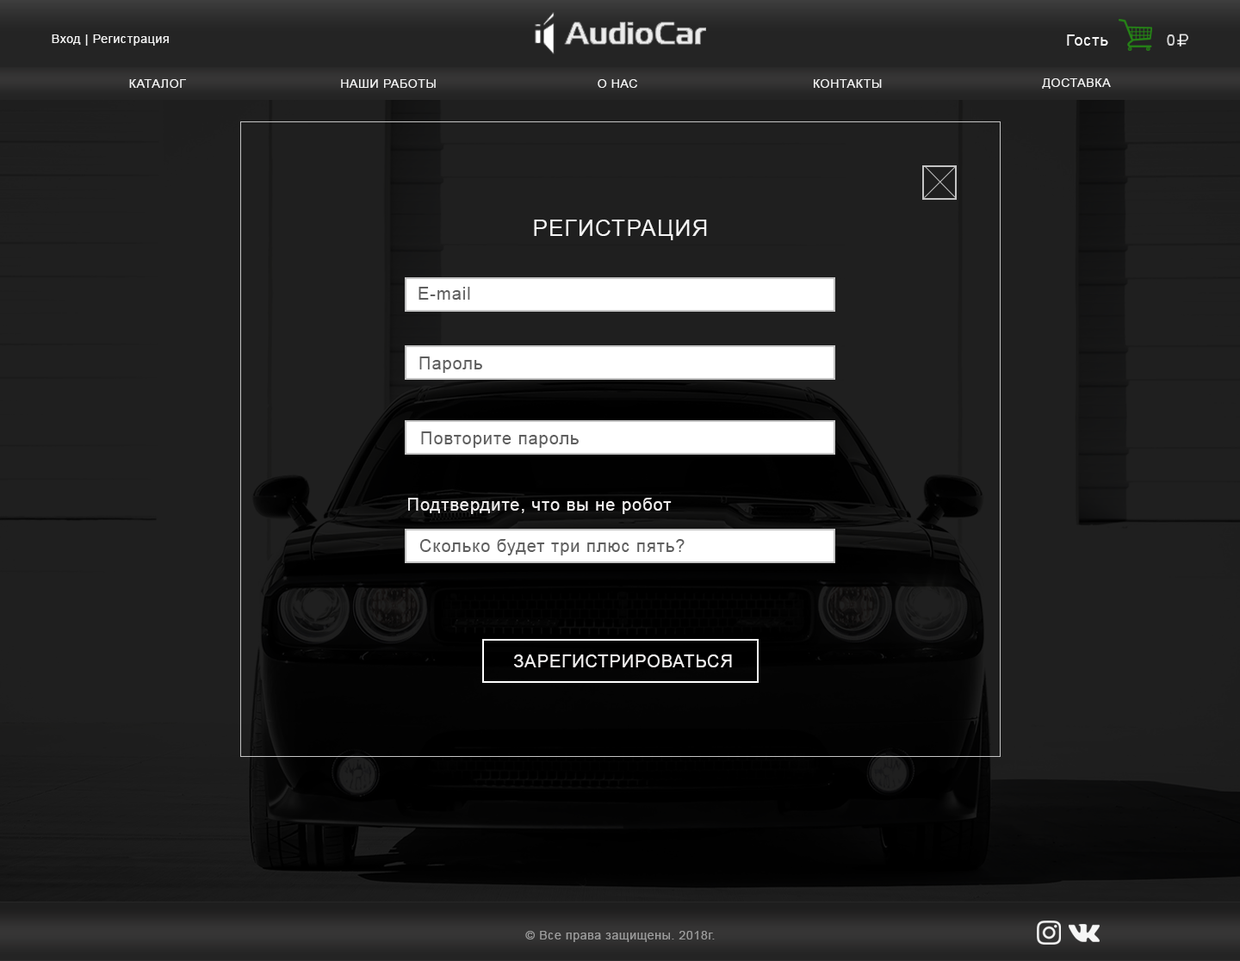
<style>
.page{position:relative;width:1240px;height:961px;background:#1f1f1f}
.page>*{position:absolute;margin:0}
.t1{font:12.1px "ArialMT";letter-spacing:0.05em;color:#f4f4f4}
.t2{font:15.5px "ArialMT";letter-spacing:0.05em;color:#f4f4f4}
.t3{font:15.5px "ArialMT";letter-spacing:0.05em;color:#d4d4d4}
.t4{font:22.4px "ArialMT";letter-spacing:0.05em;color:#f4f4f4}
.t5{font:17.2px "ArialMT";letter-spacing:0.05em;color:#5f5f5f}
.t6{font:17.2px "ArialMT";letter-spacing:0.05em;color:#f1efef}
.t7{font:12.1px "ArialMT";letter-spacing:0.05em;color:#9d9d9d}
</style>
<div class="page">
<p class="t1" style="left:52px;top:34px;width:117px;height:12px">Вход | Регистрация</p>
<p class="t2" style="left:1067px;top:34px;width:42px;height:12px">Гость</p>
<p class="t3" style="left:1167px;top:34px;width:8px;height:12px">0</p>
<p class="t1" style="left:129px;top:79px;width:57px;height:9px">КАТАЛОГ</p>
<p class="t1" style="left:341px;top:79px;width:95px;height:9px">НАШИ РАБОТЫ</p>
<p class="t1" style="left:598px;top:79px;width:39px;height:9px">О НАС</p>
<p class="t1" style="left:814px;top:79px;width:68px;height:9px">КОНТАКТЫ</p>
<p class="t1" style="left:1042px;top:78px;width:69px;height:11px">ДОСТАВКА</p>
<p class="t4" style="left:534px;top:220px;width:173px;height:20px">РЕГИСТРАЦИЯ</p>
<p class="t5" style="left:419px;top:287px;width:51px;height:13px">E-mail</p>
<p class="t5" style="left:420px;top:357px;width:62px;height:16px">Пароль</p>
<p class="t5" style="left:421px;top:432px;width:158px;height:16px">Повторите пароль</p>
<p class="t6" style="left:408px;top:498px;width:264px;height:16px">Подтвердите, что вы не робот</p>
<p class="t5" style="left:420px;top:539px;width:265px;height:17px">Сколько будет три плюс пять?</p>
<p class="t6" style="left:514px;top:655px;width:218px;height:13px">ЗАРЕГИСТРИРОВАТЬСЯ</p>
<p class="t7" style="left:525px;top:931px;width:190px;height:11px">© Все права защищены. 2018г.</p>
</div>
